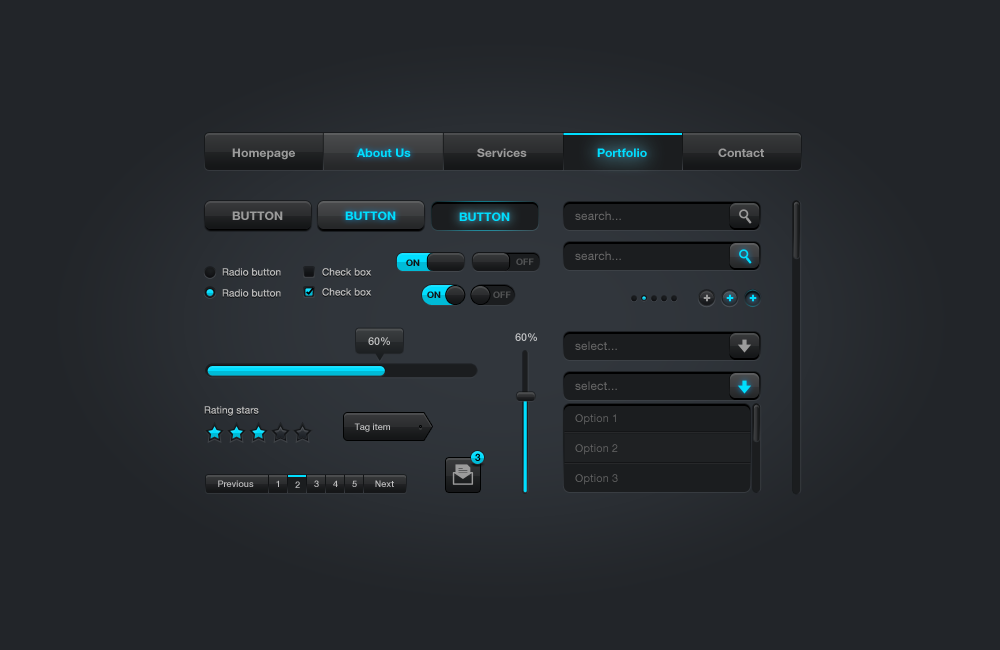
<style>
.page{position:relative;width:1000px;height:650px;background:#222529}
.page>*{position:absolute;margin:0}
.t1{font:12px "HelveticaNeueLTCom-Bd";letter-spacing:0.01em;color:#9b9b9b}
.t2{font:12px "HelveticaNeueLTCom-Bd";letter-spacing:0.01em;color:#00deff}
.t3{font:12px "HelveticaNeueLTCom-Roman";letter-spacing:0.01em;color:#686868}
.t4{font:10px "HelveticaNeueLTCom-Roman";letter-spacing:0.01em;color:#b9b9b9}
.t5{font:9px "HelveticaNeueLTCom-Bd";letter-spacing:0.01em;color:#111315}
.t6{font:9px "HelveticaNeueLTCom-Bd";letter-spacing:0.01em;color:#515253}
.t7{font:13px "HelveticaNeueLTCom-Blk";letter-spacing:0.01em;color:#9b9b9b}
.t8{font:13px "HelveticaNeueLTCom-Blk";letter-spacing:0.01em;color:#00deff}
.t9{font:11px "HelveticaNeueLTCom-Md";color:#bfc0c0}
.t10{font:11px "HelveticaNeueLTCom-Md";color:#c2c4c5}
.t11{font:11px/30px "HelveticaNeueLTCom-Roman";letter-spacing:0.01em;color:#686868}
.t12{font:9px "HelveticaNeueLTCom-Md";color:#bebebf}
.t13{font:10px "HelveticaNeueLTCom-Md";color:#000000}
.t14{font:9px "HelveticaNeueLTCom-Md";color:#bebebe}
.t15{font:9px "HelveticaNeueLTCom-Md";color:#bfbfc0}
.t16{font:9px "HelveticaNeueLTCom-Md"}
</style>
<div class="page">
<p class="t1" style="left:232px;top:148px;width:63px;height:12px">Homepage</p>
<p class="t2" style="left:356px;top:148px;width:55px;height:9px">About Us</p>
<p class="t1" style="left:477px;top:148px;width:50px;height:9px">Services</p>
<p class="t2" style="left:597px;top:148px;width:50px;height:9px">Portfolio</p>
<p class="t1" style="left:718px;top:148px;width:46px;height:9px">Contact</p>
<p class="t1" style="left:232px;top:211px;width:51px;height:9px">BUTTON</p>
<p class="t2" style="left:345px;top:211px;width:51px;height:9px">BUTTON</p>
<p class="t2" style="left:459px;top:212px;width:51px;height:9px">BUTTON</p>
<p class="t3" style="left:575px;top:211px;width:46px;height:9px">search...</p>
<p class="t3" style="left:575px;top:251px;width:46px;height:9px">search...</p>
<p class="t4" style="left:222px;top:268px;width:59px;height:8px">Radio button</p>
<p class="t4" style="left:322px;top:268px;width:50px;height:8px">Check box</p>
<p class="t5" style="left:406px;top:259px;width:14px;height:7px">ON</p>
<p class="t6" style="left:516px;top:258px;width:18px;height:7px">OFF</p>
<p class="t4" style="left:222px;top:289px;width:59px;height:8px">Radio button</p>
<p class="t4" style="left:322px;top:288px;width:50px;height:8px">Check box</p>
<p class="t5" style="left:427px;top:291px;width:14px;height:7px">ON</p>
<p class="t6" style="left:493px;top:291px;width:18px;height:7px">OFF</p>
<p class="t7" style="left:703px;top:294px;width:8px;height:8px">+</p>
<p class="t8" style="left:726px;top:294px;width:8px;height:8px">+</p>
<p class="t8" style="left:749px;top:294px;width:8px;height:8px">+</p>
<p class="t9" style="left:368px;top:337px;width:22px;height:9px">60%</p>
<p class="t10" style="left:515px;top:333px;width:22px;height:9px">60%</p>
<p class="t3" style="left:575px;top:341px;width:42px;height:9px">select...</p>
<p class="t3" style="left:575px;top:381px;width:42px;height:9px">select...</p>
<p class="t4" style="left:204px;top:406px;width:55px;height:10px">Rating stars</p>
<p class="t11" style="left:575px;top:414px;width:43px;height:71px">Option 1<br>Option 2<br>Option 3</p>
<p class="t12" style="left:354px;top:423px;width:36px;height:9px">Tag item</p>
<p class="t13" style="left:475px;top:453px;width:6px;height:8px">3</p>
<p class="t14" style="left:218px;top:480px;width:36px;height:7px">Previous</p>
<p class="t15" style="left:276px;top:480px;width:3px;height:7px">1</p>
<p class="t16" style="left:295px;top:481px;width:5px;height:7px">2</p>
<p class="t16" style="left:314px;top:480px;width:5px;height:7px">3</p>
<p class="t15" style="left:333px;top:480px;width:5px;height:7px">4</p>
<p class="t16" style="left:352px;top:480px;width:5px;height:7px">5</p>
<p class="t12" style="left:375px;top:480px;width:19px;height:7px">Next</p>
</div>
